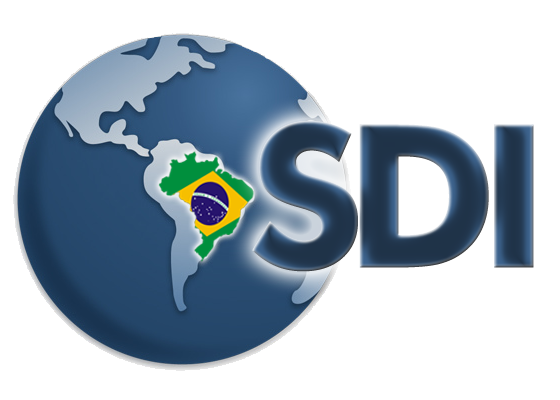
<style>
.page{position:relative;width:560px;height:400px;background:#ffffff}
.page>*{position:absolute;margin:0}
.t1{font:200px "FuturaBT-Bold";letter-spacing:-0.1em}
</style>
<div class="page">
<p class="t1" style="left:252px;top:121px;width:282px;height:151px">SDI</p>
</div>
